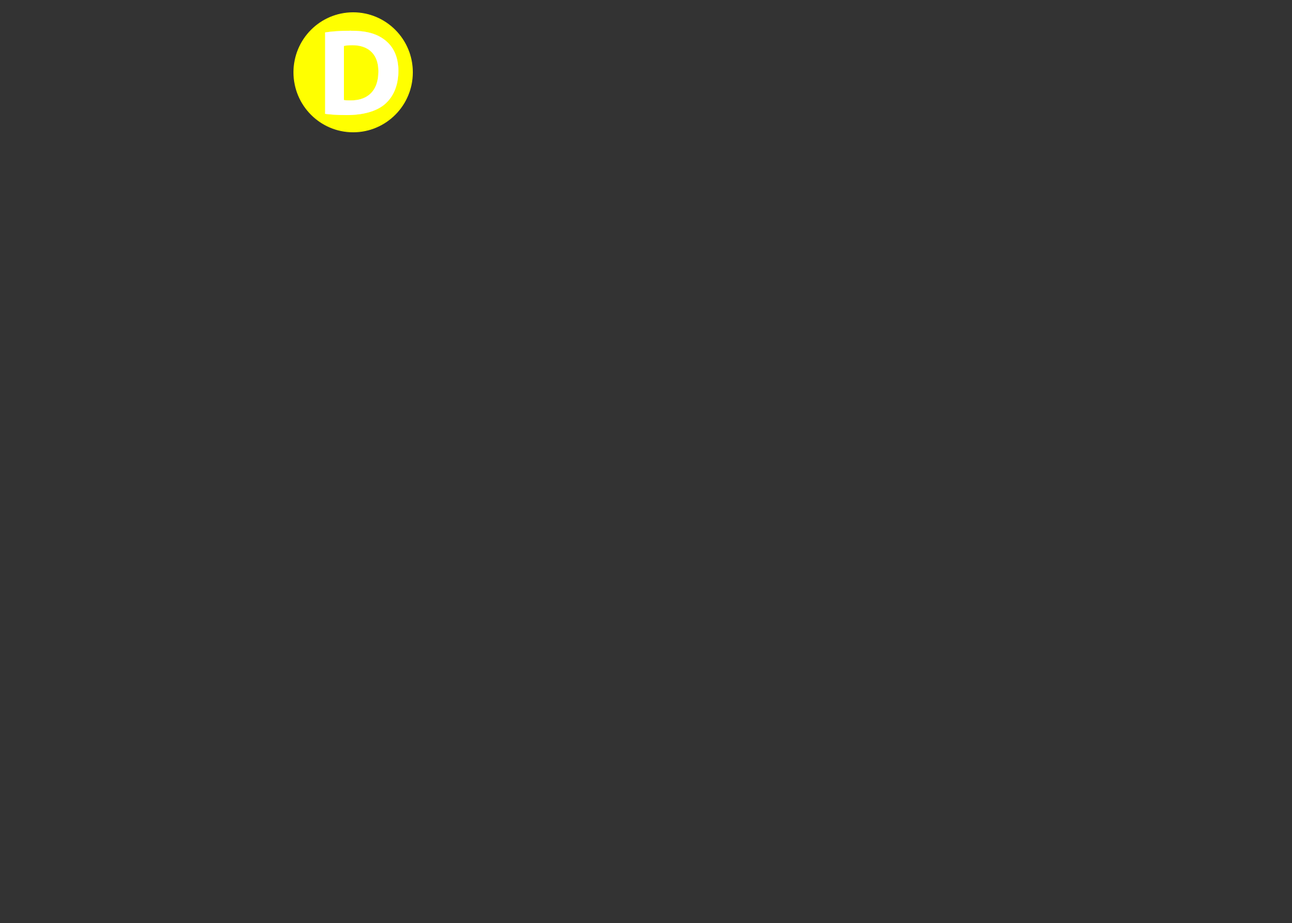
<style>
.page{position:relative;width:1292px;height:923px;background:#333333}
.page>*{position:absolute;margin:0}
.t1{font:123.1px "MyriadPro-Bold";color:#ffffff}
</style>
<div class="page">
<p class="t1" style="left:325px;top:30px;width:74px;height:85px">D</p>
</div>
